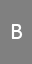
<style>
.page{position:relative;width:32px;height:64px;background:#808080}
.page>*{position:absolute;margin:0}
.t1{font:24px "Calibri";color:#feffff}
</style>
<div class="page">
<p class="t1" style="left:11px;top:24px;width:12px;height:15px">B</p>
</div>
